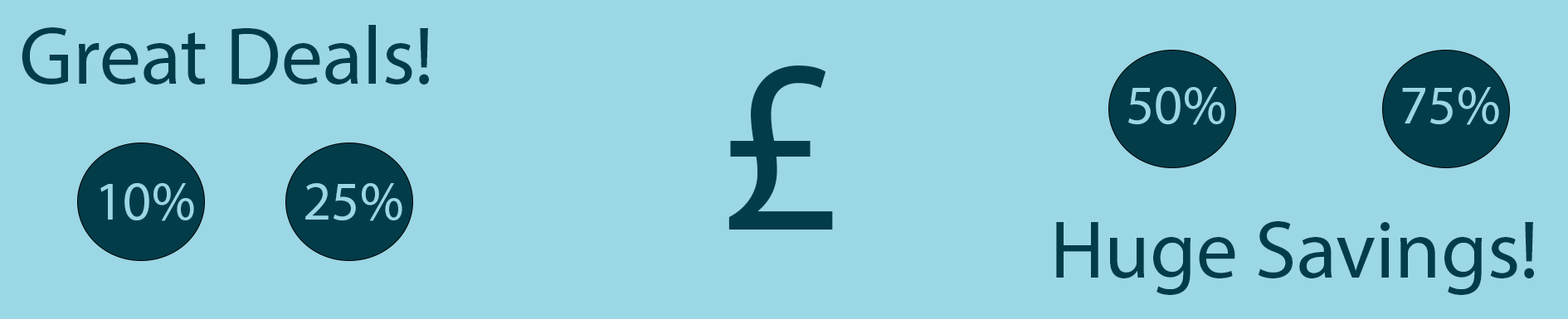
<style>
.page{position:relative;width:1568px;height:319px;background:#9bd7e5}
.page>*{position:absolute;margin:0}
.t1{font:83px "MyriadPro-Regular";color:#023c49}
.t2{font:248.9px "MyriadPro-Regular";color:#023c49}
.t3{font:55.3px "MyriadPro-Regular";color:#9bd7e5}
</style>
<div class="page">
<p class="t1" style="left:22px;top:25px;width:407px;height:60px">Great Deals!</p>
<p class="t2" style="left:728px;top:66px;width:105px;height:165px">£</p>
<p class="t3" style="left:1128px;top:87px;width:97px;height:38px">50%</p>
<p class="t3" style="left:1402px;top:87px;width:97px;height:38px">75%</p>
<p class="t3" style="left:100px;top:183px;width:94px;height:39px">10%</p>
<p class="t3" style="left:305px;top:183px;width:97px;height:39px">25%</p>
<p class="t1" style="left:1056px;top:222px;width:478px;height:73px">Huge Savings!</p>
</div>
